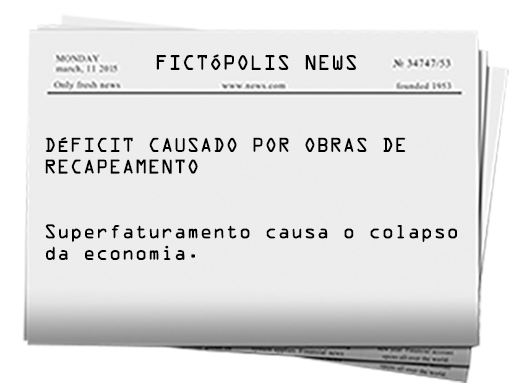
<style>
.page{position:relative;width:512px;height:387px;background:#ededed}
.page>*{position:absolute;margin:0}
.t1{font:18.8px "OCRAStd";color:#000000}
.t2{font:18px "OCRAStd";color:#000000}
</style>
<div class="page">
<p class="t1" style="left:156px;top:54px;width:200px;height:16px">FICTÓPOLIS NEWS</p>
<p class="t2" style="left:45px;top:137px;width:412px;height:123px">DÉFICIT CAUSADO POR OBRAS DE<br>RECAPEAMENTO<br><br><br>Superfaturamento causa o colapso <br>da economia.</p>
</div>
